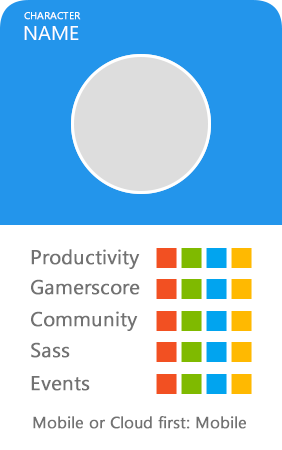
<style>
.page{position:relative;width:282px;height:450px;background:#ffffff}
.page>*{position:absolute;margin:0}
.t1{font:10px "SegoeUI";color:#ffffff;font-weight:bold}
.t2{font:20px "SegoeUI";color:#ffffff}
.t3{font:20px "SegoeUI";color:#727272;font-weight:bold}
.t4{font:16px "SegoeUI";color:#727272;font-weight:bold}
</style>
<div class="page">
<p class="t1" style="left:24px;top:12px;width:57px;height:8px">CHARACTER</p>
<p class="t2" style="left:24px;top:26px;width:55px;height:14px">NAME</p>
<p class="t3" style="left:31px;top:249px;width:109px;height:20px">Productivity</p>
<p class="t3" style="left:31px;top:279px;width:109px;height:16px">Gamerscore</p>
<p class="t3" style="left:31px;top:311px;width:107px;height:20px">Community</p>
<p class="t3" style="left:31px;top:342px;width:39px;height:16px">Sass</p>
<p class="t3" style="left:31px;top:376px;width:59px;height:15px">Events</p>
<p class="t4" style="left:33px;top:416px;width:213px;height:13px">Mobile or Cloud first: Mobile</p>
</div>
